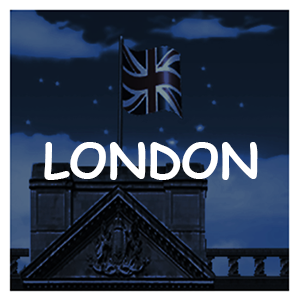
<style>
.page{position:relative;width:300px;height:300px}
.page>*{position:absolute;margin:0}
.t1{font:48px "ComicSansMS-Bold";color:#ffffff}
</style>
<div class="page">
<p class="t1" style="left:44px;top:142px;width:214px;height:38px">LONDON</p>
</div>
